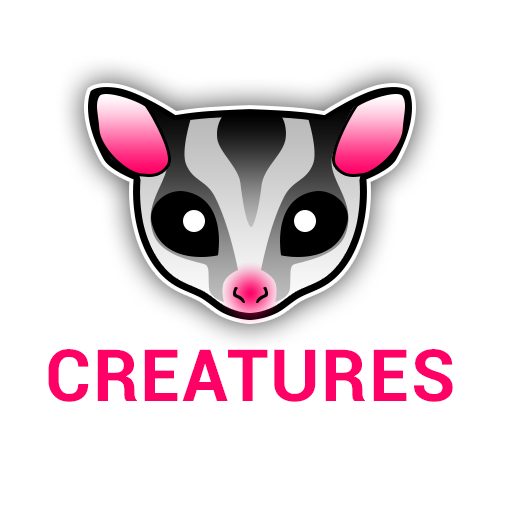
<style>
.page{position:relative;width:512px;height:512px;background:#ffffff}
.page>*{position:absolute;margin:0}
.t1{font:72px "Roboto-Bold";letter-spacing:0.025em;color:#ff0066}
</style>
<div class="page">
<p class="t1" style="left:48px;top:349px;width:405px;height:53px">CREATURES</p>
</div>
